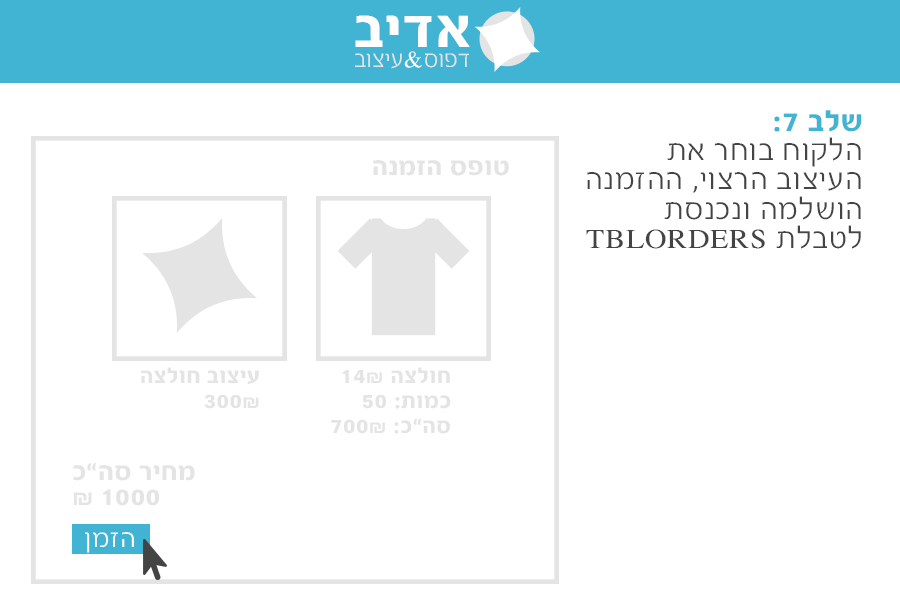
<style>
.page{position:relative;width:900px;height:600px;background:#ffffff}
.page>*{position:absolute;margin:0}
.t1{font:60.1px "FbEleganti-Bold";letter-spacing:0.02em;color:#ffffff;scale:1.1 1}
.t2{font:25.5px "FbEleganti-Regular";color:#e4e4e4;scale:1.05 1}
.t3{font:25.5px "FbEleganti-Regular";color:#ffffff;scale:1.05 1}
.t4{font:32px/29.2px "FbEleganti-Regular";letter-spacing:0.02em;color:#444444;scale:1.09 1}
.t5{font:32px/29.2px "FbEleganti-Bold";letter-spacing:0.02em;color:#41b3d3;scale:1.09 1}
.t6{font:28px "FbEleganti-Bold";letter-spacing:0.02em;color:#e4e4e4;scale:1.09 1}
.t7{font:24px/25px "FbEleganti-Bold";letter-spacing:0.02em;color:#e4e4e4;scale:1.09 1}
.t8{font:28px/25px "FbEleganti-Bold";letter-spacing:0.02em;color:#e4e4e4;scale:1.09 1}
.t9{font:28px "FbEleganti-Regular";letter-spacing:0.02em;color:#ffffff;scale:1.09 1}
.t10{font:28px "FbEleganti-Regular";letter-spacing:0.02em;color:#41b3d3;scale:1.09 1}
</style>
<div class="page">
<p class="t1" style="left:355px;top:15px;width:115px;height:32px">אדיב</p>
<p class="t2" style="left:355px;top:51px;width:114px;height:18px">דפוס<span class="t3">&amp;</span>עיצוב</p>
<p class="t4" style="left:586px;top:110px;width:276px;height:139px"><span class="t5">שלב 7:<br></span>הלקוח בוחר את העיצוב הרצוי, ההזמנה הושלמה ונכנסת לטבלת TBLORDERS</p>
<p class="t6" style="left:373px;top:160px;width:136px;height:16px">טופס הזמנה</p>
<p class="t7" style="left:141px;top:367px;width:118px;height:42px">עיצוב חולצה<br>300₪</p>
<p class="t7" style="left:331px;top:367px;width:120px;height:67px">חולצה 14₪<br>כמות: 50<br>סה”כ: 700₪</p>
<p class="t8" style="left:73px;top:463px;width:122px;height:43px;text-align:right">מחיר סה”כ<br>1000 ₪</p>
<p class="t9" style="left:85px;top:532px;width:49px;height:21px"><span class="t10"> </span>הזמן</p>
</div>
